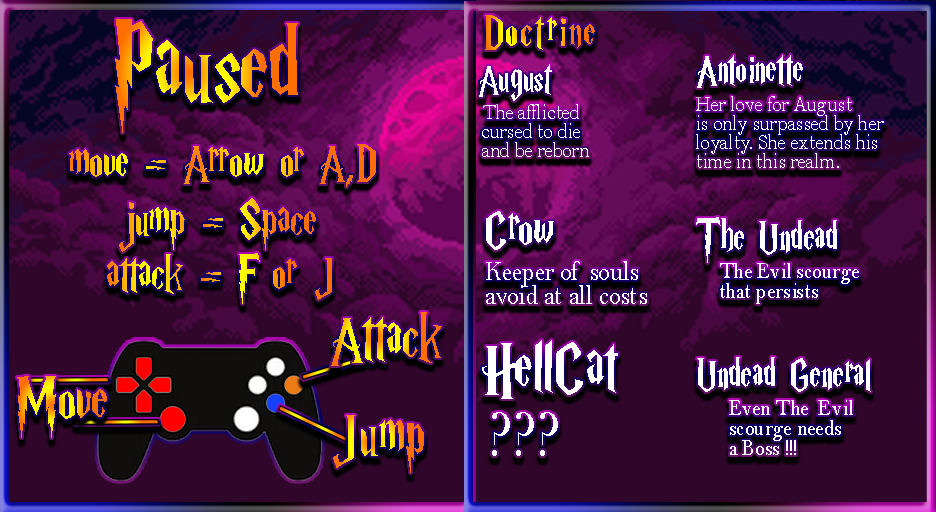
<style>
.page{position:relative;width:936px;height:512px;background:#30062b}
.page>*{position:absolute;margin:0}
.t1{font:49.4px "HarryP";letter-spacing:0.06em;scale:0.86 1}
.t2{font:118.1px "HarryP";scale:0.86 1}
.t3{font:44.7px "HarryP";color:#ffffff;scale:0.86 1}
.t4{font:45.3px "HarryP";color:#ffffff;scale:0.86 1}
.t5{font:22.3px/19.3px "BellMT";color:#ffffff;scale:0.86 1}
.t6{font:22px/19px "BellMT";color:#ffffff;scale:0.86 1}
.t7{font:54.6px "HarryP";scale:0.86 1}
.t8{font:56.5px "HarryP";color:#ffffff;scale:0.86 1}
.t9{font:47px "HarryP";color:#ffffff;scale:0.86 1}
.t10{font:27.8px/24px "BellMT";color:#ffffff;scale:0.86 1}
.t11{font:23.2px/20px "BellMT";color:#ffffff;scale:0.86 1}
.t12{font:69.3px "HarryP";scale:0.86 1}
.t13{font:76px "HarryP";color:#ffffff;scale:0.86 1}
.t14{font:65.6px "BellMT";color:#ffffff;scale:0.86 1}
</style>
<div class="page">
<p class="t1" style="left:485px;top:15px;width:110px;height:35px">Doctrine</p>
<p class="t2" style="left:115px;top:19px;width:183px;height:114px">Paused</p>
<p class="t3" style="left:479px;top:64px;width:73px;height:37px">August</p>
<p class="t4" style="left:697px;top:55px;width:106px;height:33px">Antoinette</p>
<p class="t5" style="left:696px;top:96px;width:188px;height:72px">Her love for August <br>is only surpassed by her <br>loyalty. She extends his <br>time in this realm.</p>
<p class="t6" style="left:482px;top:104px;width:107px;height:53px">The afflicted<br>cursed to die <br>and be reborn</p>
<p class="t7" style="left:69px;top:144px;width:307px;height:43px">move = Arrow or A,D</p>
<p class="t7" style="left:119px;top:198px;width:197px;height:54px">jump = Space</p>
<p class="t8" style="left:486px;top:211px;width:68px;height:39px">Crow</p>
<p class="t9" style="left:696px;top:217px;width:141px;height:46px">The Undead</p>
<p class="t7" style="left:107px;top:253px;width:225px;height:51px">attack = F or J</p>
<p class="t10" style="left:486px;top:261px;width:161px;height:43px">Keeper of souls <br>avoid at all costs</p>
<p class="t11" style="left:720px;top:263px;width:139px;height:41px">The Evil scourge<br>that persists</p>
<p class="t12" style="left:331px;top:312px;width:111px;height:54px">Attack</p>
<p class="t13" style="left:482px;top:340px;width:136px;height:59px">HellCat</p>
<p class="t9" style="left:697px;top:357px;width:174px;height:35px">Undead General</p>
<p class="t12" style="left:17px;top:376px;width:90px;height:62px">Move</p>
<p class="t11" style="left:729px;top:400px;width:124px;height:55px">Even The  Evil <br>scourge needs <br>a Boss !!!</p>
<p class="t14" style="left:492px;top:412px;width:66px;height:44px">???</p>
<p class="t12" style="left:333px;top:415px;width:91px;height:58px">Jump</p>
</div>
